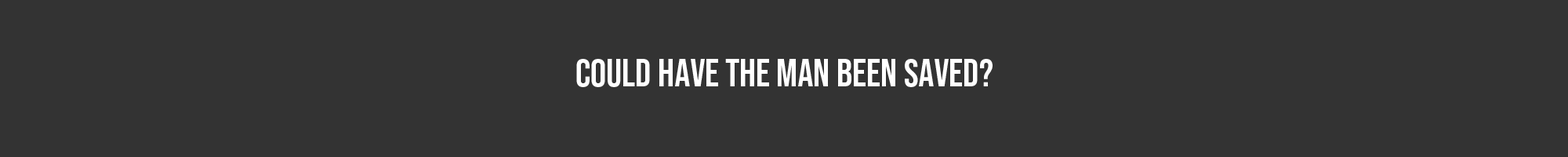
<style>
.page{position:relative;width:1568px;height:157px;background:#333333}
.page>*{position:absolute;margin:0}
.t1{font:9.4px "BebasNeue-Regular";color:#ffffff}
</style>
<div class="page">
<p class="t1" style="left:576px;top:59px;width:417px;height:28px">Could have the man been saved?</p>
</div>
